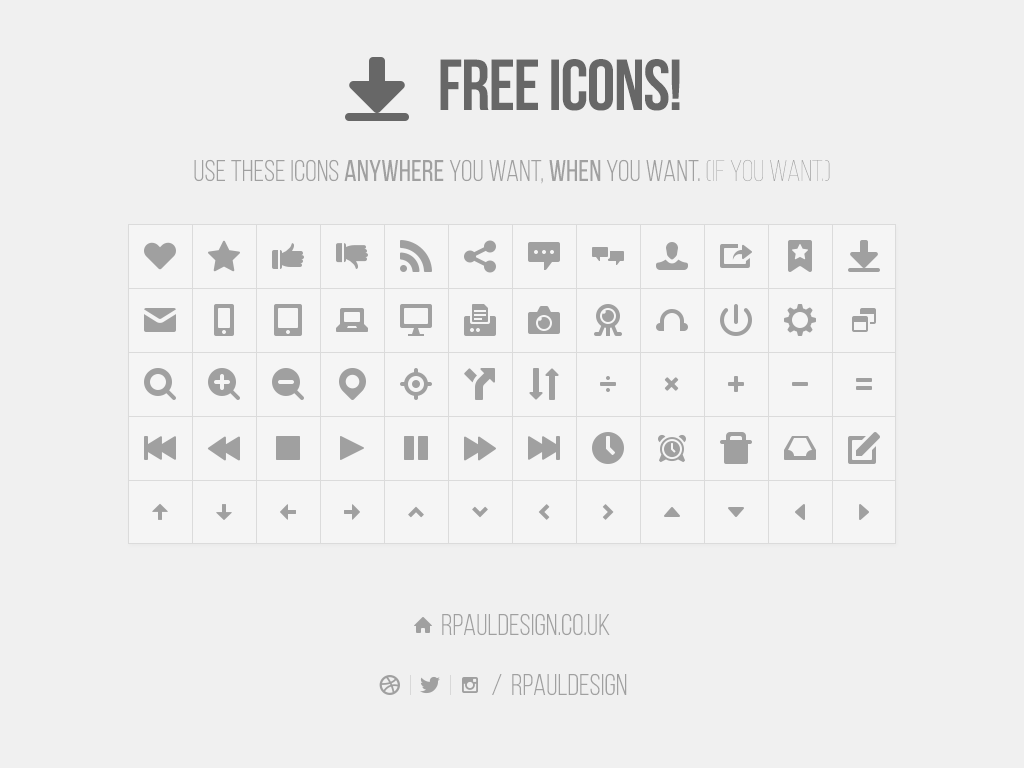
<style>
.page{position:relative;width:1024px;height:768px;background:#f0f0f0}
.page>*{position:absolute;margin:0}
.t1{font:72px "BebasNeueBold";color:#676767}
.t2{font:30px "BebasNeueBook";color:#a0a0a0}
.t3{font:30px "BebasNeueRegular";color:#a0a0a0}
.t4{font:30px "BebasNeueLight";color:#a0a0a0}
</style>
<div class="page">
<p class="t1" style="left:440px;top:59px;width:240px;height:52px">Free ICONS!</p>
<p class="t2" style="left:194px;top:159px;width:636px;height:25px">use these icons <span class="t3">anywhere</span> you want, <span class="t3">when</span> you want. <span class="t4">(If you want.)</span></p>
<p class="t2" style="left:442px;top:613px;width:168px;height:23px">rpauldesign.co.uk</p>
<p class="t2" style="left:492px;top:674px;width:10px;height:21px">/</p>
<p class="t2" style="left:512px;top:673px;width:115px;height:23px">rpauldesign</p>
</div>
